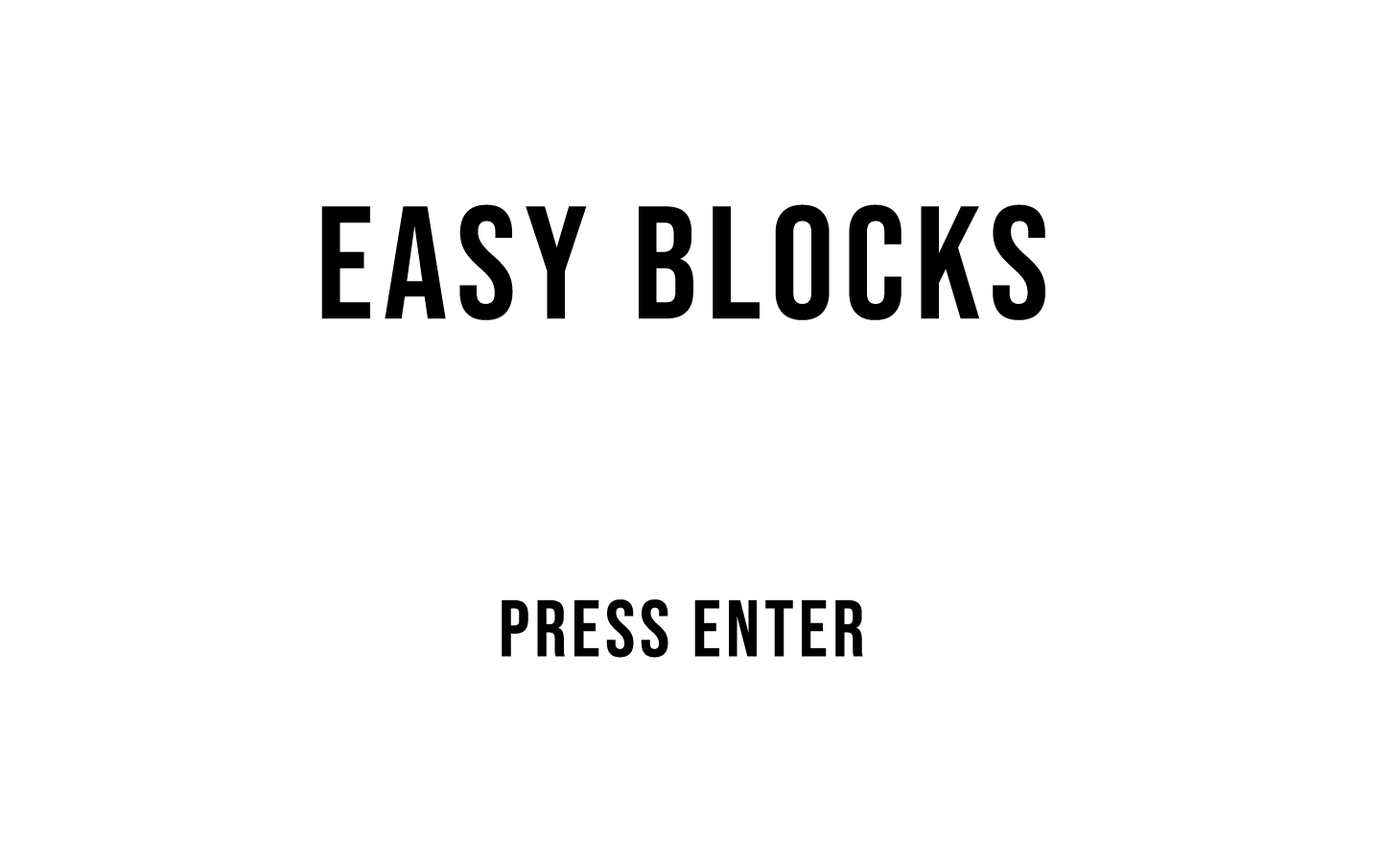
<style>
.page{position:relative;width:1381px;height:863px;background:#ffffff}
.page>*{position:absolute;margin:0}
.t1{font:159.9px "BebasNeue-Regular";letter-spacing:0.06em;color:#000000}
.t2{font:79.9px "BebasNeue-Regular";letter-spacing:0.06em;color:#000000}
</style>
<div class="page">
<p class="t1" style="left:321px;top:204px;width:725px;height:116px">EASY BLOCKS</p>
<p class="t2" style="left:502px;top:600px;width:361px;height:58px">pRESS ENTER</p>
</div>
